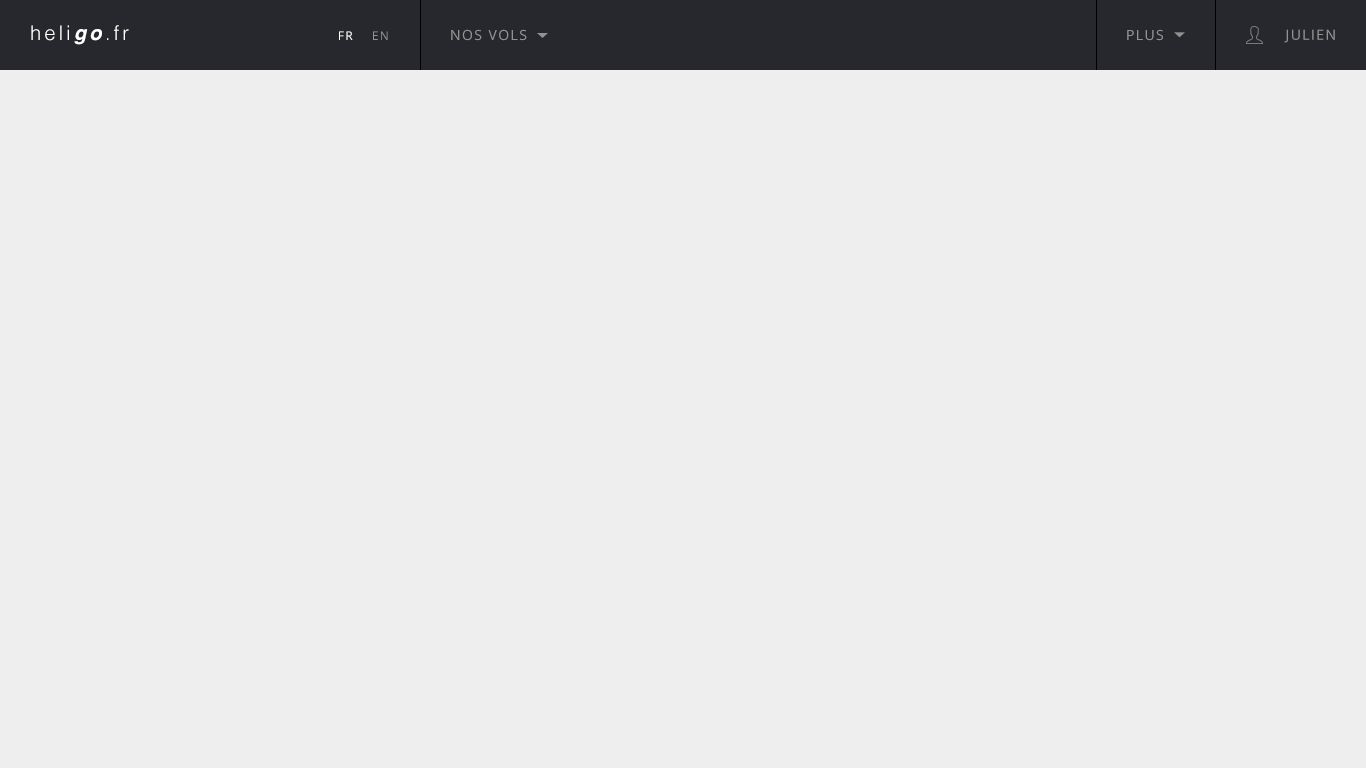
<style>
.page{position:relative;width:1366px;height:768px;background:#eeeeee}
.page>*{position:absolute;margin:0}
.t1{font:20px "Helvetica-Light";letter-spacing:0.16em;color:#ffffff}
.t2{font:20px "Helvetica-BoldOblique";letter-spacing:0.16em;color:#ffffff}
.t3{font:14px "OpenSans";letter-spacing:0.1em;color:#929292;text-transform:uppercase}
.t4{font:12px "OpenSans";letter-spacing:0.1em;color:#ffffff;text-transform:uppercase}
.t5{font:12px "OpenSans";letter-spacing:0.1em;color:#929292;text-transform:uppercase}
</style>
<div class="page">
<p class="t1" style="left:31px;top:25px;width:98px;height:20px">heli<span class="t2">go</span>.fr</p>
<p class="t3" style="left:451px;top:29px;width:76px;height:12px">nos vols</p>
<p class="t3" style="left:1127px;top:29px;width:36px;height:12px">plus</p>
<p class="t3" style="left:1284px;top:29px;width:51px;height:14px">julien</p>
<p class="t4" style="left:339px;top:31px;width:14px;height:9px">Fr</p>
<p class="t5" style="left:373px;top:31px;width:15px;height:9px">En</p>
</div>
